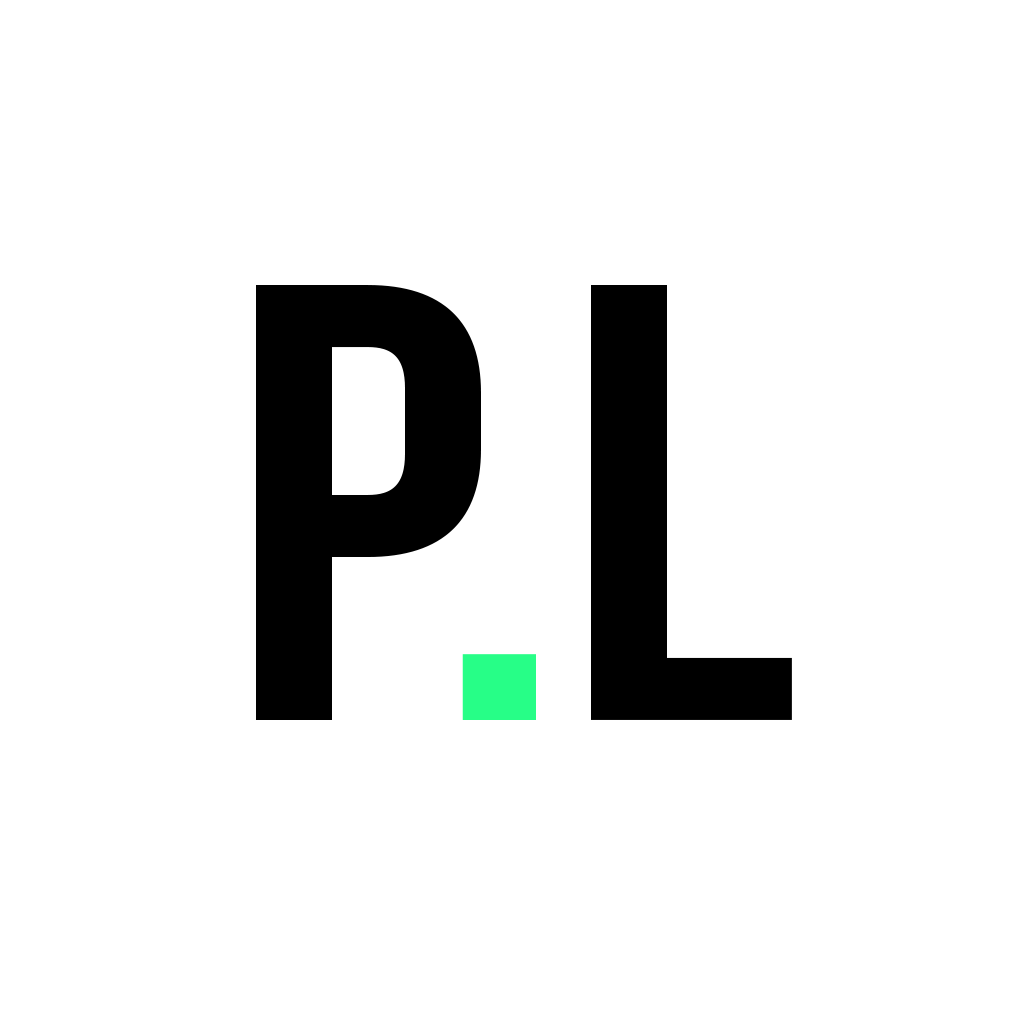
<style>
.page{position:relative;width:1024px;height:1024px;background:#ffffff}
.page>*{position:absolute;margin:0}
.t1{font:621px "BebasNeueBold";color:#000000;scale:1.11 1}
.t2{font:621px "BebasNeueBold";color:#27fe87;scale:1.11 1}
</style>
<div class="page">
<p class="t1" style="left:256px;top:285px;width:536px;height:435px">P<span class="t2">.</span>L</p>
</div>
